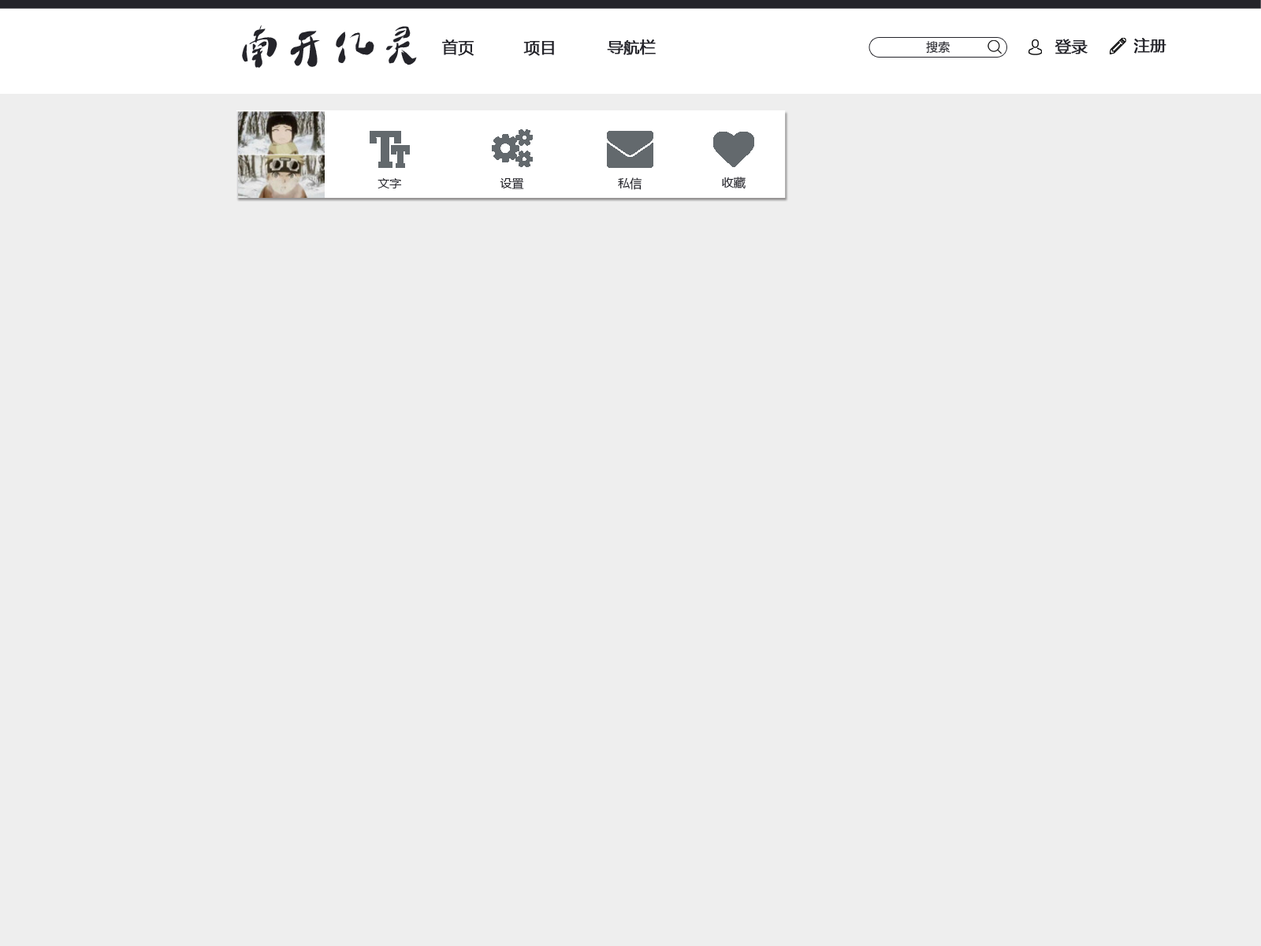
<style>
.page{position:relative;width:1261px;height:946px;background:#eeeeee}
.page>*{position:absolute;margin:0}
.t1{font:47.3px "DLTZkDLF";color:#24242a}
.t2{font:15.8px "MicrosoftYaHei";color:#24242a;font-weight:bold}
.t3{font:11.8px "MicrosoftYaHei";color:#24242a}
</style>
<div class="page">
<p class="t1" style="left:242px;top:25px;width:175px;height:43px">南开亿灵</p>
<p class="t2" style="left:442px;top:39px;width:32px;height:17px">首页</p>
<p class="t2" style="left:523px;top:41px;width:31px;height:15px">项目</p>
<p class="t2" style="left:607px;top:39px;width:49px;height:16px">导航栏</p>
<p class="t3" style="left:926px;top:41px;width:24px;height:13px">搜索</p>
<p class="t2" style="left:1054px;top:39px;width:34px;height:15px">登录</p>
<p class="t2" style="left:1133px;top:38px;width:33px;height:16px">注册</p>
<p class="t3" style="left:377px;top:178px;width:25px;height:10px">文字</p>
<p class="t3" style="left:500px;top:178px;width:24px;height:11px">设置</p>
<p class="t3" style="left:618px;top:177px;width:23px;height:13px">私信</p>
<p class="t3" style="left:722px;top:177px;width:24px;height:12px">收藏</p>
</div>
